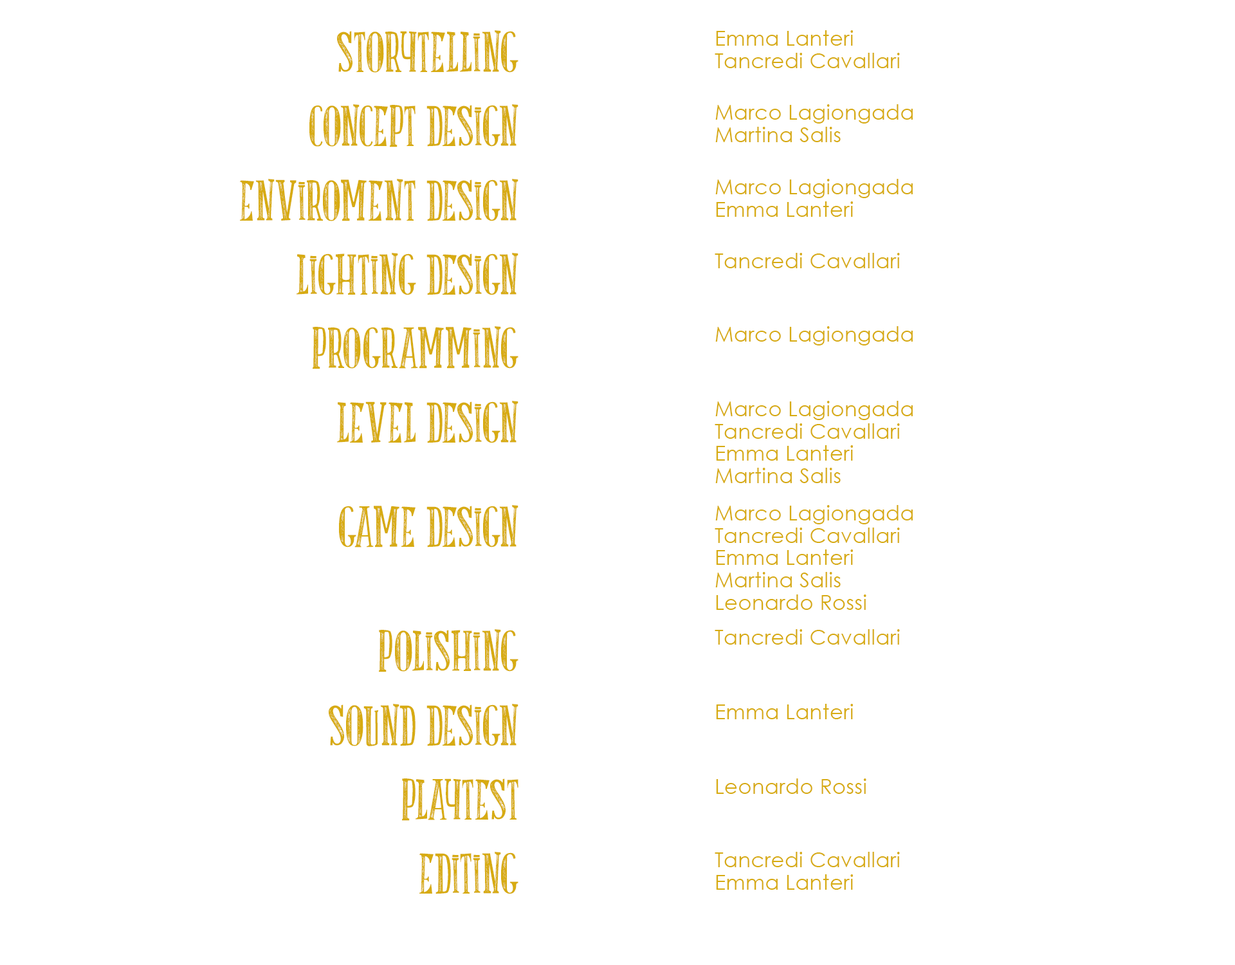
<style>
.page{position:relative;width:1235px;height:965px;background:#ffffff}
.page>*{position:absolute;margin:0}
.t1{font:56.3px "LATRUITEAPAPA";letter-spacing:0.015em;color:#d7ab12}
.t2{font:20.6px/22.3px "CenturyGothic";letter-spacing:0.015em;color:#d7ab12}
.t3{font:20.6px/0px "CenturyGothic";letter-spacing:0.015em;color:#d7ab12}
.t4{font:20.6px "CenturyGothic";letter-spacing:0.015em;color:#d7ab12}
</style>
<div class="page">
<p class="t1" style="left:337px;top:30px;width:182px;height:43px">STORYTELLING</p>
<p class="t2" style="left:715px;top:30px;width:185px;height:38px"><span class="t3">Emma Lanteri<br></span>Tancredi Cavallari</p>
<p class="t1" style="left:309px;top:104px;width:210px;height:43px">CONCEPT DESIGN</p>
<p class="t3" style="left:716px;top:104px;width:197px;height:38px">Marco Lagiongada<br><span class="t2">Martina Salis</span></p>
<p class="t1" style="left:239px;top:179px;width:280px;height:42px">ENVIROMENT DESIGN</p>
<p class="t3" style="left:716px;top:179px;width:197px;height:38px">Marco Lagiongada<br><span class="t2">Emma Lanteri</span></p>
<p class="t1" style="left:296px;top:253px;width:223px;height:42px">LIGHTING DESIGN</p>
<p class="t4" style="left:715px;top:253px;width:185px;height:15px">Tancredi Cavallari</p>
<p class="t1" style="left:313px;top:326px;width:206px;height:43px">PROGRAMMING</p>
<p class="t4" style="left:716px;top:326px;width:197px;height:20px">Marco Lagiongada</p>
<p class="t1" style="left:337px;top:401px;width:182px;height:42px">LEVEL DESIGN</p>
<p class="t2" style="left:715px;top:401px;width:198px;height:82px"><span class="t3">Marco Lagiongada</span><br>Tancredi Cavallari<br>Emma Lanteri<br>Martina Salis</p>
<p class="t1" style="left:338px;top:505px;width:181px;height:43px">GAME DESIGN</p>
<p class="t2" style="left:715px;top:505px;width:198px;height:105px"><span class="t3">Marco Lagiongada</span><br>Tancredi Cavallari<br>Emma Lanteri<br>Martina Salis<br>Leonardo Rossi</p>
<p class="t1" style="left:379px;top:629px;width:140px;height:43px">POLISHING</p>
<p class="t4" style="left:715px;top:629px;width:185px;height:16px">Tancredi Cavallari</p>
<p class="t1" style="left:328px;top:704px;width:191px;height:42px">SOUND DESIGN</p>
<p class="t4" style="left:716px;top:704px;width:137px;height:15px">Emma Lanteri</p>
<p class="t1" style="left:402px;top:779px;width:117px;height:42px">PLAYTEST</p>
<p class="t4" style="left:716px;top:779px;width:151px;height:15px">Leonardo Rossi</p>
<p class="t1" style="left:419px;top:852px;width:100px;height:42px">EDITING</p>
<p class="t3" style="left:715px;top:852px;width:185px;height:38px">Tancredi Cavallari<span class="t2"><br>Emma Lanteri</span></p>
</div>
